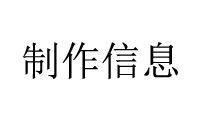
<style>
.page{position:relative;width:200px;height:122px;background:#ffffff}
.page>*{position:absolute;margin:0}
.t1{font:40px "SimSun";color:#000000}
</style>
<div class="page">
<p class="t1" style="left:22px;top:42px;width:156px;height:38px">制作信息</p>
</div>
